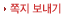
<style>
.page{position:relative;width:66px;height:18px;background:#ffffff}
.page>*{position:absolute;margin:0}
.t1{font:11.6px "YDIYGO330";letter-spacing:-0.03em;color:#cd3131;scale:0.92 1}
</style>
<div class="page">
<p class="t1" style="left:10px;top:3px;width:51px;height:11px">쪽지 보내기</p>
</div>
